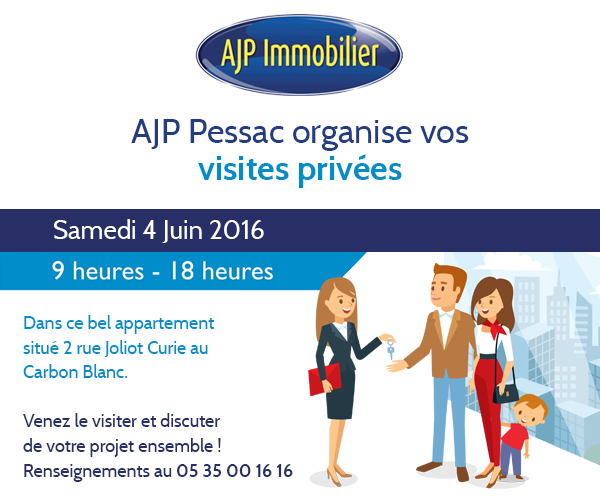
<style>
.page{position:relative;width:600px;height:500px;background:#ffffff}
.page>*{position:absolute;margin:0}
.t1{font:34px/34px "Cabin-Regular";color:#233c82}
.t2{font:34px/34px "Cabin-Bold";color:#018dca}
.t3{font:26px "Cabin-Regular";color:#ffffff}
.t4{font:18px "Cabin-Regular";color:#282f66}
.t5{font:18px "Cabin-Regular";color:#018dca}
.t6{font:18px "Cabin-Bold";color:#282f66}
</style>
<div class="page">
<p class="t1" style="left:131px;top:119px;width:338px;height:69px;text-align:center">AJP Pessac organise vos<br><span class="t2">visites privées</span></p>
<p class="t3" style="left:54px;top:219px;width:210px;height:24px">Samedi 4 Juin 2016</p>
<p class="t4" style="left:23px;top:315px;width:270px;height:167px"><span class="t5">Dans ce bel appartement<br>situé 2 rue Joliot Curie au<br>Carbon Blanc.<br><br></span>Venez le visiter et discuter<br>de votre projet ensemble !<br>Renseignements au <span class="t6">05 35 00 16 16</span></p>
</div>
